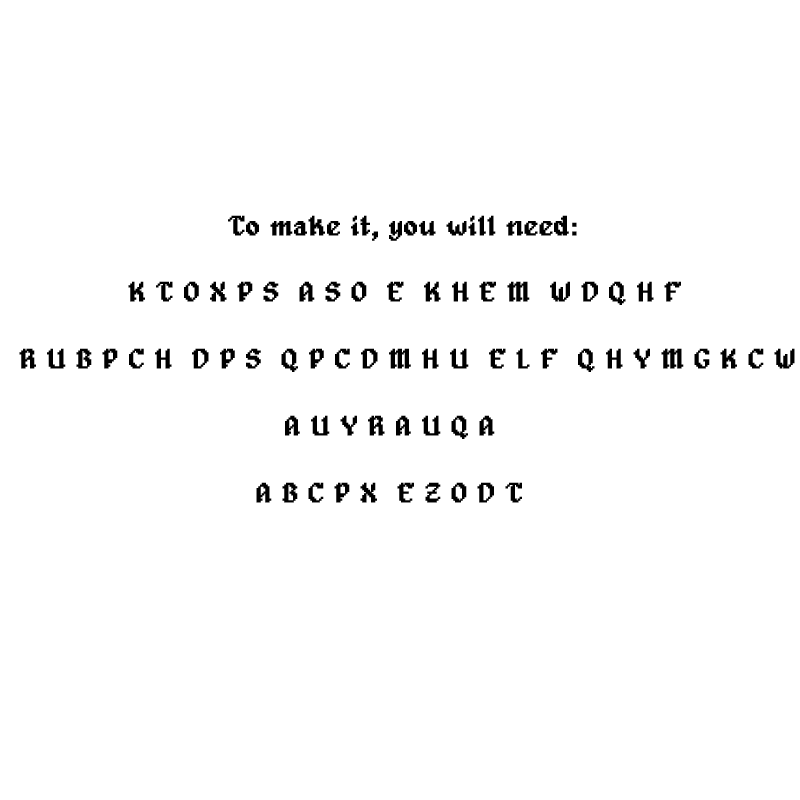
<style>
.page{position:relative;width:800px;height:800px;background:#ffffff}
.page>*{position:absolute;margin:0}
.t1{font:27.9px "Alagard";color:#000000;font-weight:bold}
</style>
<div class="page">
<p class="t1" style="left:19px;top:215px;width:776px;height:288px">To make it, you will need: <br><br>    K T O X P S  A S O  E  K H E M  W D Q H F <br><br>  R U B P C H  D P S  Q P C D M H U  E L F  Q H Y M G K C W<br><br>           A U Y R A U Q A <br><br>          A B C P X  E Z O D T</p>
</div>
